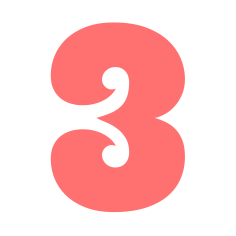
<style>
.page{position:relative;width:236px;height:236px;background:#ffffff}
.page>*{position:absolute;margin:0}
.t1{font:250px "SpicyRice-Regular";color:#ff7171}
</style>
<div class="page">
<p class="t1" style="left:50px;top:22px;width:135px;height:191px">3</p>
</div>
